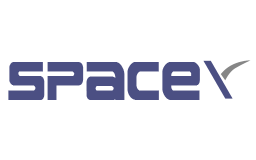
<style>
.page{position:relative;width:256px;height:160px;background:#ffffff}
.page>*{position:absolute;margin:0}
.t1{font:53.4px "EarthNormal";color:#4b4f83;font-weight:bold;scale:0.72 1}
</style>
<div class="page">
<p class="t1" style="left:8px;top:62px;width:192px;height:38px">SPACE</p>
</div>
